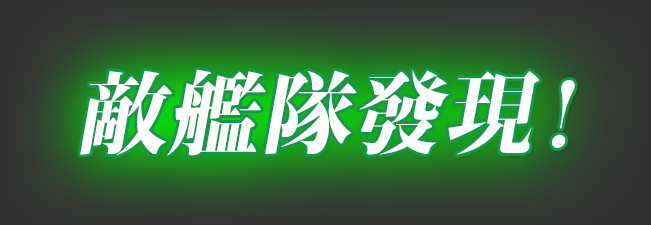
<style>
.page{position:relative;width:651px;height:225px}
.page>*{position:absolute;margin:0}
.t1{font:90px "KochoStd-Heavy";letter-spacing:0.02em;color:#ffffff;font-style:italic}
</style>
<div class="page">
<p class="t1" style="left:80px;top:69px;width:495px;height:87px">敵艦隊發現！</p>
</div>
